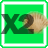
<style>
.page{position:relative;width:48px;height:48px;background:#00ea4d}
.page>*{position:absolute;margin:0}
.t1{font:30px "FranklinGothic-Heavy";letter-spacing:-0.1em}
</style>
<div class="page">
<p class="t1" style="left:0px;top:14px;width:34px;height:20px">X2</p>
<p class="t1" style="left:0px;top:14px;width:34px;height:20px">X2</p>
</div>
